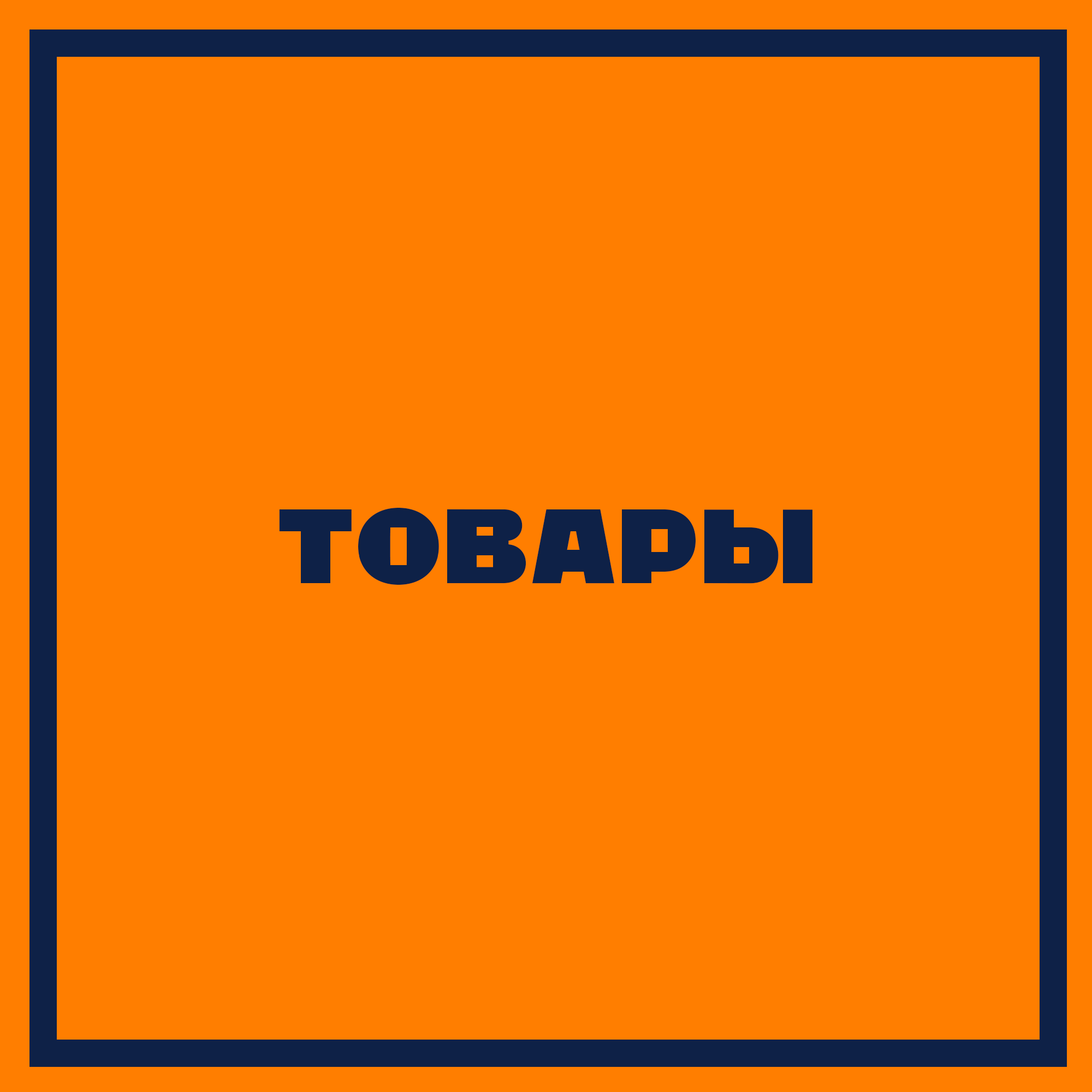
<style>
.page{position:relative;width:1092px;height:1092px;background:#ff7e00}
.page>*{position:absolute;margin:0}
.t1{font:109.2px "StrogiyDemo-A-Black";color:#0e2147}
</style>
<div class="page">
<p class="t1" style="left:279px;top:508px;width:533px;height:77px">ТОВАРЫ</p>
</div>
